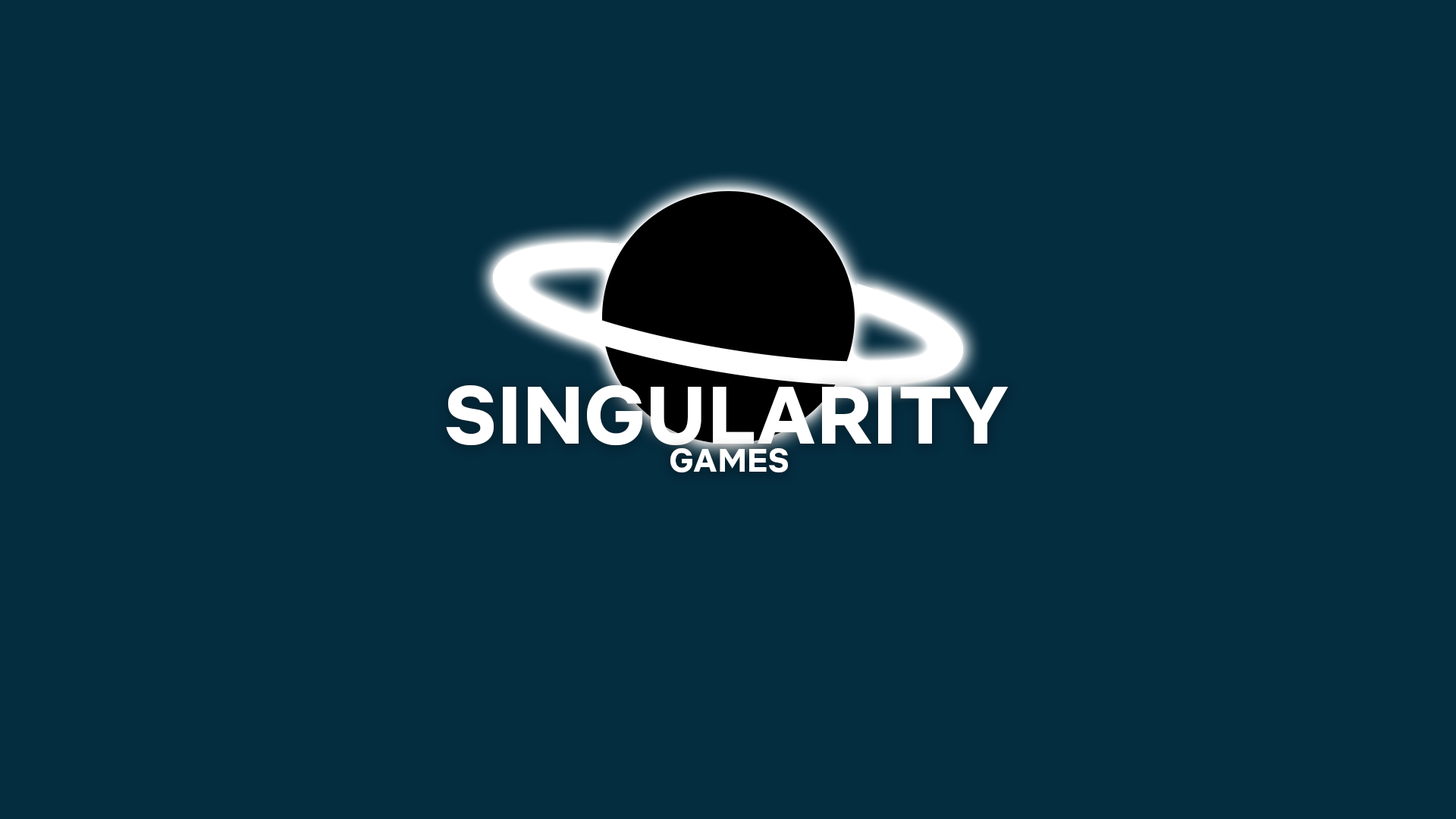
<style>
.page{position:relative;width:1456px;height:819px;background:#042d40}
.page>*{position:absolute;margin:0}
.t1{font:81.7px "NetflixSans-Bold";color:#ffffff}
.t2{font:33px "NetflixSans-Bold";color:#ffffff}
</style>
<div class="page">
<p class="t1" style="left:446px;top:385px;width:563px;height:61px">SINGULARITY</p>
<p class="t2" style="left:670px;top:448px;width:118px;height:24px">GAMES</p>
</div>
